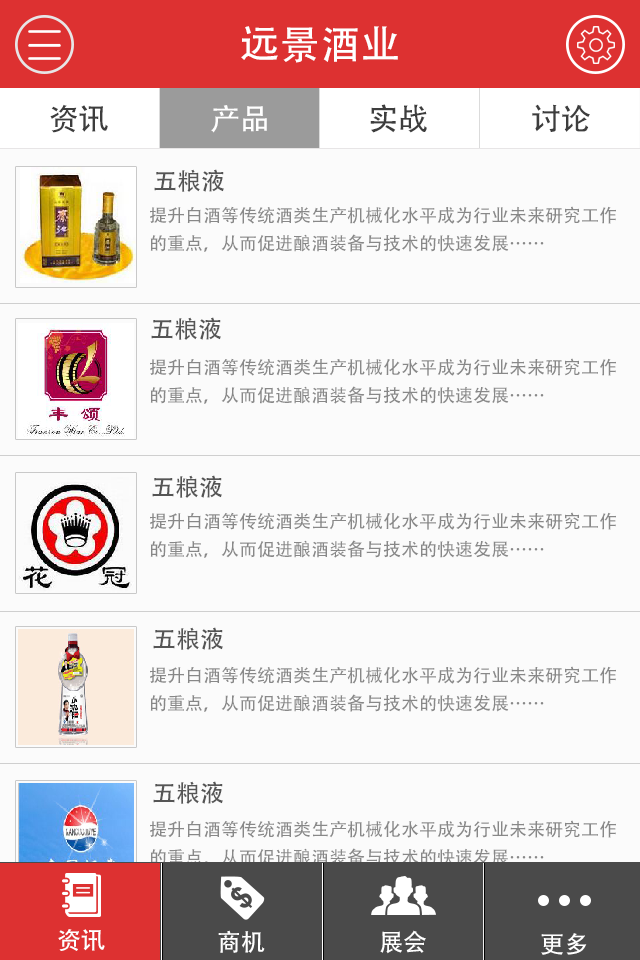
<style>
.page{position:relative;width:640px;height:960px;background:#fbfbfb}
.page>*{position:absolute;margin:0}
.t1{font:40px "AdobeHeitiStd-Regular";color:#ffffff}
.t2{font:30px "AdobeHeitiStd-Regular";color:#3d3d3d}
.t3{font:30px "AdobeHeitiStd-Regular";color:#ffffff}
.t4{font:24px "AdobeHeitiStd-Regular";color:#555555}
.t5{font:18px/28px "AdobeHeitiStd-Regular";color:#878787}
.t6{font:18px/28px "AdobeHeitiStd-Regular";color:#888888}
.t7{font:24px "AdobeHeitiStd-Regular";color:#ffffff}
</style>
<div class="page">
<p class="t1" style="left:241px;top:26px;width:157px;height:37px">远景酒业</p>
<p class="t2" style="left:50px;top:104px;width:58px;height:29px">资讯</p>
<p class="t3" style="left:211px;top:105px;width:56px;height:28px">产品</p>
<p class="t2" style="left:370px;top:104px;width:57px;height:29px">实战</p>
<p class="t2" style="left:532px;top:104px;width:58px;height:28px">讨论</p>
<p class="t4" style="left:154px;top:169px;width:70px;height:23px">五粮液</p>
<p class="t5" style="left:150px;top:206px;width:466px;height:46px">提升白酒等传统酒类生产机械化水平成为行业未来研究工作<br>的重点，从而促进酿酒装备与技术的快速发展……</p>
<p class="t4" style="left:151px;top:317px;width:70px;height:23px">五粮液</p>
<p class="t6" style="left:150px;top:358px;width:466px;height:46px">提升白酒等传统酒类生产机械化水平成为行业未来研究工作<br>的重点，从而促进酿酒装备与技术的快速发展……</p>
<p class="t4" style="left:152px;top:475px;width:70px;height:23px">五粮液</p>
<p class="t6" style="left:150px;top:512px;width:466px;height:46px">提升白酒等传统酒类生产机械化水平成为行业未来研究工作<br>的重点，从而促进酿酒装备与技术的快速发展……</p>
<p class="t4" style="left:153px;top:627px;width:70px;height:23px">五粮液</p>
<p class="t6" style="left:150px;top:666px;width:466px;height:46px">提升白酒等传统酒类生产机械化水平成为行业未来研究工作<br>的重点，从而促进酿酒装备与技术的快速发展……</p>
<p class="t4" style="left:153px;top:781px;width:70px;height:23px">五粮液</p>
<p class="t6" style="left:150px;top:820px;width:466px;height:46px">提升白酒等传统酒类生产机械化水平成为行业未来研究工作<br>的重点，从而促进酿酒装备与技术的快速发展……</p>
<p class="t7" style="left:58px;top:929px;width:47px;height:22px">资讯</p>
<p class="t7" style="left:218px;top:930px;width:47px;height:23px">商机</p>
<p class="t7" style="left:380px;top:930px;width:46px;height:24px">展会</p>
<p class="t7" style="left:541px;top:933px;width:46px;height:22px">更多</p>
</div>
